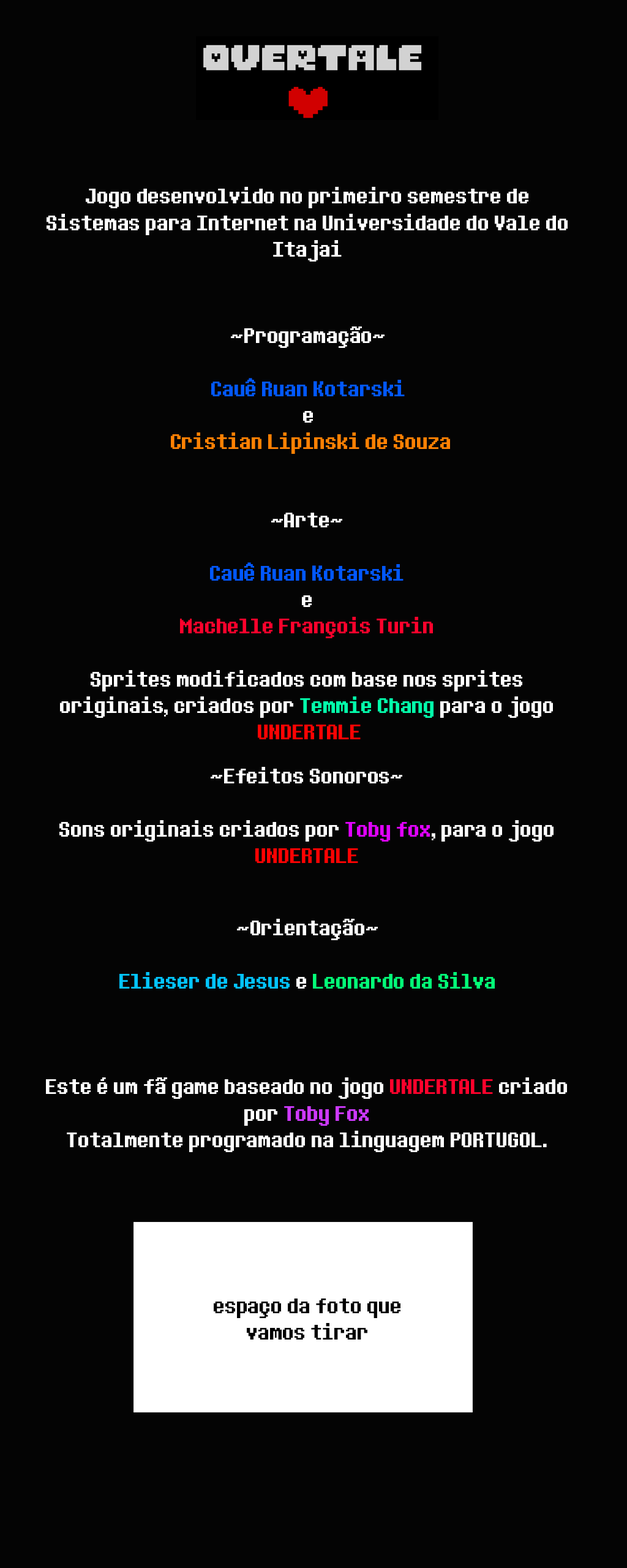
<style>
.page{position:relative;width:627px;height:1568px;background:#040404}
.page>*{position:absolute;margin:0}
.t1{font:22.1px "DeterminationSans";color:#ffffff}
.t2{font:22.1px "DeterminationSans";color:#ff8103}
.t3{font:22.1px "DeterminationSans";color:#0258ff}
.t4{font:22.1px "DeterminationSans";color:#ff022c}
.t5{font:22.1px "DeterminationSans";color:#03ffab}
.t6{font:22.1px "DeterminationSans";color:#ff0303}
.t7{font:22.1px "DeterminationSans";color:#e102ff}
.t8{font:22.1px "DeterminationSans";color:#ff0202}
.t9{font:22.1px "DeterminationSans";color:#03ff78}
.t10{font:22.1px "DeterminationSans";color:#03c4ff}
.t11{font:22.1px "DeterminationSans";color:#ce39ff}
.t12{font:22.1px "DeterminationSans";color:#030303}
</style>
<div class="page">
<p class="t1" style="left:47px;top:187px;width:521px;height:75px;text-align:center">Jogo desenvolvido no primeiro semestre de <br>Sistemas para Internet na Universidade do Vale do Itajai</p>
<p class="t2" style="left:171px;top:326px;width:279px;height:128px;text-align:center"><span class="t1">~Programação~<br><br></span><span class="t3">Cauê Ruan Kotarski</span><span class="t1">  <br>e <br> </span>Cristian Lipinski de Souza</p>
<p class="t1" style="left:60px;top:513px;width:493px;height:226px;text-align:center">~Arte~<br><br><span class="t3">Cauê Ruan Kotarski</span> <br>e <br><span class="t4">Machelle François Turin<br></span><br>Sprites modificados com base nos sprites <br>originais, criados por <span class="t5">Temmie Chang</span> para o jogo<br> <span class="t6">UNDERTALE</span></p>
<p class="t1" style="left:59px;top:767px;width:495px;height:96px;text-align:center">~Efeitos Sonoros~<br><br>Sons originais criados por <span class="t7">Toby fox</span>, para o jogo <span class="t8">UNDERTALE</span></p>
<p class="t9" style="left:119px;top:919px;width:376px;height:70px;text-align:center"><span class="t1">~Orientação~<br><br></span><span class="t10">Elieser de Jesus</span><span class="t1"> e </span>Leonardo da Silva</p>
<p class="t1" style="left:46px;top:1077px;width:521px;height:75px;text-align:center">Este é um fã game baseado no jogo <span class="t4">UNDERTALE</span> criado por <span class="t11">Toby Fox<br></span>Totalmente programado na linguagem PORTUGOL.</p>
<p class="t12" style="left:214px;top:1298px;width:187px;height:42px;text-align:center">espaço da foto que vamos tirar</p>
</div>
